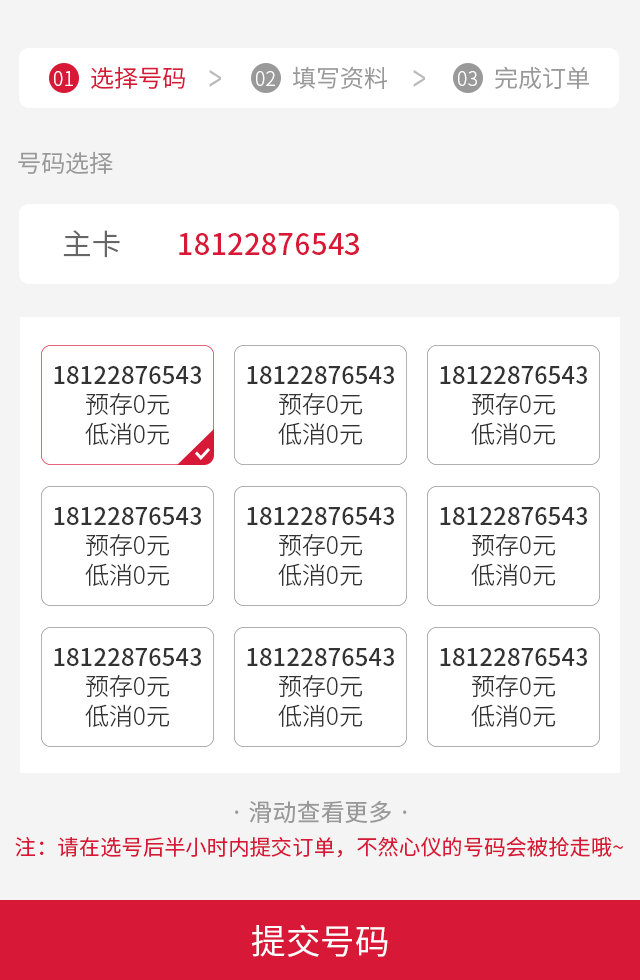
<style>
.page{position:relative;width:640px;height:980px;background:#ffffff}
.page>*{position:absolute;margin:0}
.t1{font:19.5px "SourceHanSansCN-Light";color:#ffffff}
.t2{font:24px "SourceHanSansCN-Normal";color:#d71937}
.t3{font:39.3px "SourceHanSansCN-Normal";color:#bbbbbb;scale:0.61 1}
.t4{font:24px "SourceHanSansCN-Normal";color:#999999}
.t5{font:29.3px "SourceHanSansCN-Normal";color:#666666}
.t6{font:29.3px "SourceHanSansCN-Medium";color:#d71937}
.t7{font:24px/29.3px "SourceHanSansCN-Medium";color:#333333}
.t8{font:24px/29.3px "SourceHanSansCN-Light";color:#333333}
.t9{font:24px "SourceHanSansCN-Regular";color:#999999}
.t10{font:21.3px "SourceHanSansCN-Regular";color:#d71937}
.t11{font:34.7px "SourceHanSansCN-Regular";color:#ffffff}
</style>
<div class="page">
<p class="t1" style="left:54px;top:71px;width:19px;height:15px">01</p>
<p class="t2" style="left:91px;top:66px;width:94px;height:23px">选择号码</p>
<p class="t3" style="left:209px;top:69px;width:12px;height:18px">&gt;</p>
<p class="t1" style="left:256px;top:71px;width:19px;height:15px">02</p>
<p class="t4" style="left:293px;top:66px;width:95px;height:24px">填写资料</p>
<p class="t3" style="left:413px;top:69px;width:12px;height:18px">&gt;</p>
<p class="t1" style="left:458px;top:71px;width:19px;height:15px">03</p>
<p class="t4" style="left:495px;top:66px;width:94px;height:24px">完成订单</p>
<p class="t4" style="left:18px;top:151px;width:95px;height:23px">号码选择</p>
<p class="t5" style="left:63px;top:230px;width:57px;height:28px">主卡</p>
<p class="t6" style="left:179px;top:233px;width:180px;height:22px">18122876543</p>
<p class="t7" style="left:54px;top:366px;width:147px;height:79px;text-align:center">18122876543<br><span class="t8">预存0元<br>低消0元</span></p>
<p class="t7" style="left:247px;top:366px;width:147px;height:79px;text-align:center">18122876543<br><span class="t8">预存0元<br>低消0元</span></p>
<p class="t7" style="left:440px;top:366px;width:147px;height:79px;text-align:center">18122876543<br><span class="t8">预存0元<br>低消0元</span></p>
<p class="t7" style="left:54px;top:507px;width:147px;height:79px;text-align:center">18122876543<br><span class="t8">预存0元<br>低消0元</span></p>
<p class="t7" style="left:247px;top:507px;width:147px;height:79px;text-align:center">18122876543<br><span class="t8">预存0元<br>低消0元</span></p>
<p class="t7" style="left:440px;top:507px;width:147px;height:79px;text-align:center">18122876543<br><span class="t8">预存0元<br>低消0元</span></p>
<p class="t7" style="left:54px;top:648px;width:147px;height:79px;text-align:center">18122876543<br><span class="t8">预存0元<br>低消0元</span></p>
<p class="t7" style="left:247px;top:648px;width:147px;height:79px;text-align:center">18122876543<br><span class="t8">预存0元<br>低消0元</span></p>
<p class="t7" style="left:440px;top:648px;width:147px;height:79px;text-align:center">18122876543<br><span class="t8">预存0元<br>低消0元</span></p>
<p class="t9" style="left:235px;top:800px;width:172px;height:24px">· 滑动查看更多 ·</p>
<p class="t10" style="left:15px;top:836px;width:609px;height:22px">注：请在选号后半小时内提交订单，不然心仪的号码会被抢走哦~</p>
<p class="t11" style="left:251px;top:925px;width:137px;height:32px">提交号码</p>
</div>
